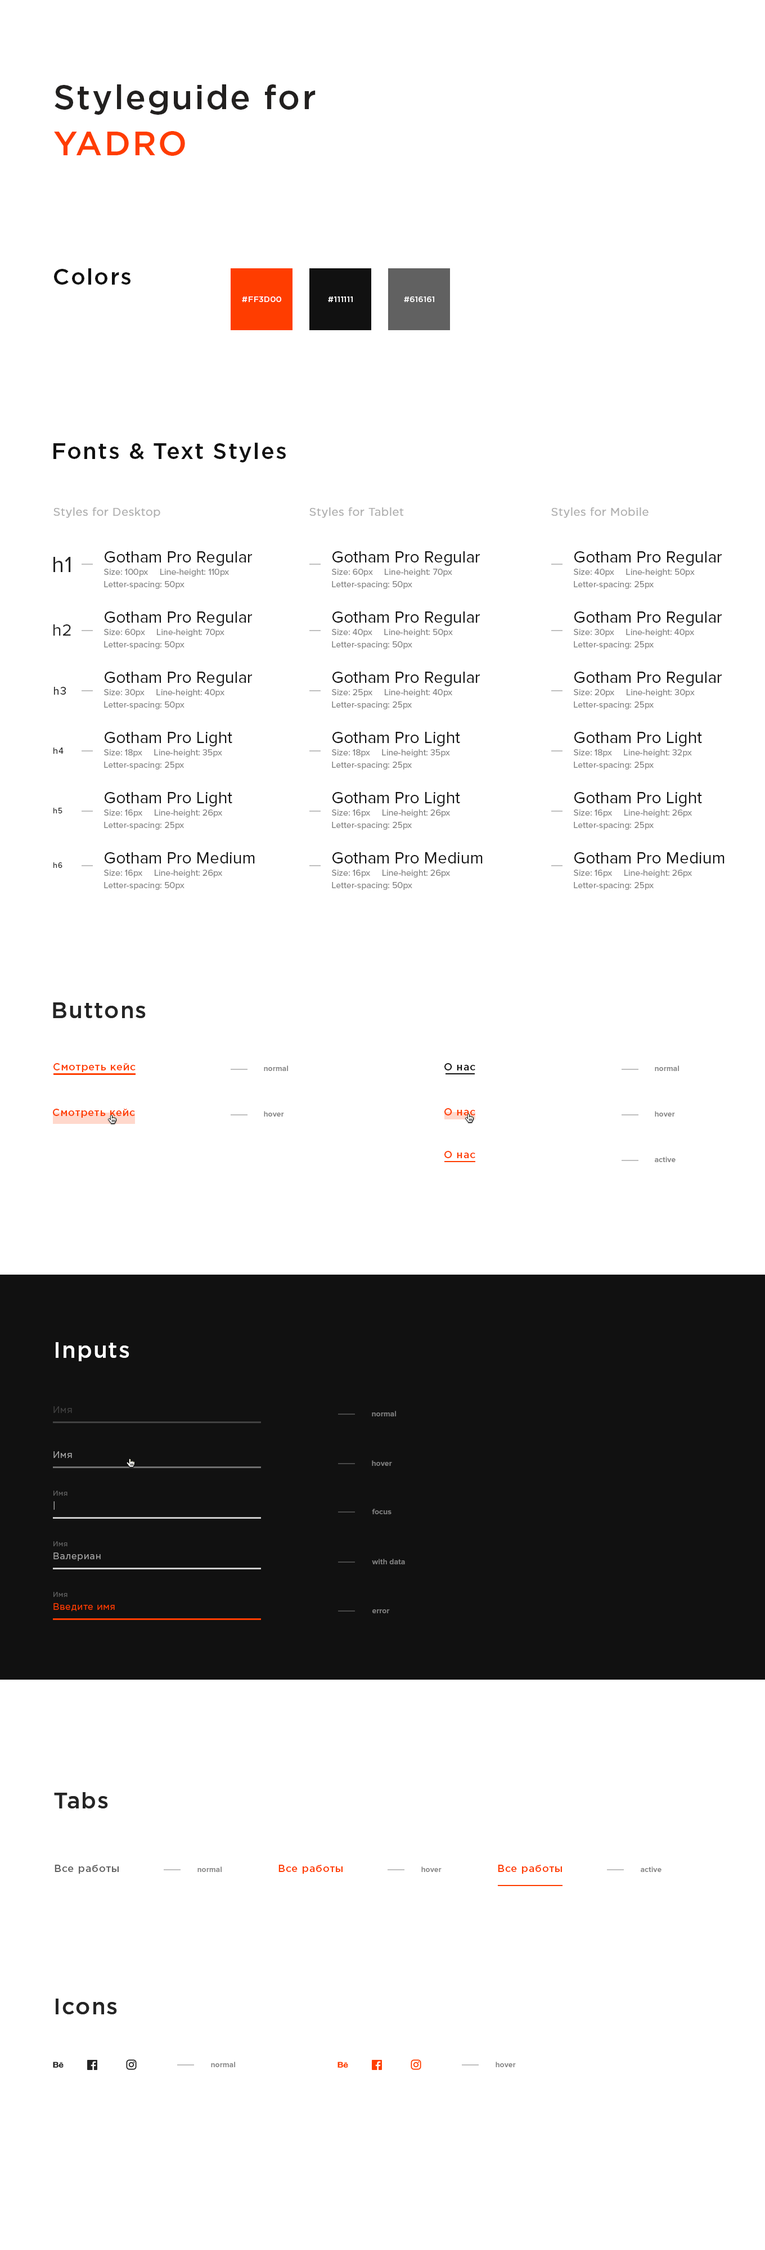
<style>
.page{position:relative;width:765px;height:2250px;background:#ffffff}
.page>*{position:absolute;margin:0}
.t1{font:33.8px/39.4px "GothamPro-Medium";letter-spacing:0.05em;color:#22201f}
.t2{font:33.8px/39.4px "GothamPro-Medium";letter-spacing:0.05em;color:#ff3d00}
.t3{font:22.5px "GothamPro-Medium";letter-spacing:0.05em;color:#111111}
.t4{font:7.9px "GothamPro-Medium";letter-spacing:0.025em;color:#ffffff;text-transform:uppercase}
.t5{font:11.2px "GothamPro";letter-spacing:0.025em;color:#b0b0b0}
.t6{font:22.5px "ProximaNova-Regular";letter-spacing:0.025em;color:#252525}
.t7{font:9px/12.4px "ProximaNova-Regular";color:#808080}
.t8{font:16.9px/33.8px "ProximaNova-Regular";color:#111111}
.t9{font:16.9px "ProximaNova-Regular";letter-spacing:0.025em;color:#252525}
.t10{font:11.2px "ProximaNova-Regular";letter-spacing:0.1em;color:#252525}
.t11{font:9px "ProximaNova-Regular";letter-spacing:0.1em;color:#252525}
.t12{font:7.9px "ProximaNova-Regular";letter-spacing:0.1em;color:#252525}
.t13{font:22.5px "GothamPro-Medium";letter-spacing:0.05em;color:#252525}
.t14{font:10.1px "GothamPro-Medium";letter-spacing:0.05em;color:#ff3d00}
.t15{font:7.9px "ProximaNova-Bold";color:#808080}
.t16{font:10.1px "GothamPro-Medium";letter-spacing:0.05em;color:#111111}
.t17{font:22.5px "GothamPro-Medium";letter-spacing:0.05em;color:#ffffff}
.t18{font:9px "GothamPro";letter-spacing:0.05em;color:#404040}
.t19{font:9px "GothamPro";letter-spacing:0.05em;color:#a6a6a6}
.t20{font:6.8px "GothamPro";letter-spacing:0.05em;color:#5e5e5e}
.t21{font:9px "GothamPro";letter-spacing:0.05em;color:#ff3d00}
.t22{font:10.1px "GothamPro-Medium";letter-spacing:0.05em;color:#616161}
</style>
<div class="page">
<p class="t1" style="left:54px;top:84px;width:262px;height:72px;text-align:right">Styleguide for<br><span class="t2">YADRO</span></p>
<p class="t3" style="left:54px;top:268px;width:76px;height:17px">Colors</p>
<p class="t4" style="left:242px;top:296px;width:39px;height:6px">#ff3d00</p>
<p class="t4" style="left:328px;top:296px;width:25px;height:6px">#111111</p>
<p class="t4" style="left:404px;top:296px;width:30px;height:6px">#616161</p>
<p class="t3" style="left:53px;top:443px;width:233px;height:19px">Fonts &amp; Text Styles</p>
<p class="t5" style="left:53px;top:507px;width:107px;height:11px">Styles for Desktop</p>
<p class="t5" style="left:309px;top:507px;width:95px;height:11px">Styles for Tablet</p>
<p class="t5" style="left:551px;top:507px;width:98px;height:11px">Styles for Mobile</p>
<p class="t6" style="left:53px;top:557px;width:18px;height:15px">h1</p>
<p class="t7" style="left:104px;top:551px;width:148px;height:38px"><span class="t8">Gotham Pro Regular<br></span>Size: 100px     Line-height: 110px<br>Letter-spacing: 50px</p>
<p class="t7" style="left:332px;top:551px;width:148px;height:38px"><span class="t8">Gotham Pro Regular<br></span>Size: 60px     Line-height: 70px<br>Letter-spacing: 50px</p>
<p class="t7" style="left:574px;top:551px;width:148px;height:38px"><span class="t8">Gotham Pro Regular<br></span>Size: 40px     Line-height: 50px<br>Letter-spacing: 25px</p>
<p class="t7" style="left:104px;top:611px;width:148px;height:38px"><span class="t8">Gotham Pro Regular<br></span>Size: 60px     Line-height: 70px<br>Letter-spacing: 50px</p>
<p class="t7" style="left:332px;top:611px;width:148px;height:38px"><span class="t8">Gotham Pro Regular<br></span>Size: 40px     Line-height: 50px<br>Letter-spacing: 50px</p>
<p class="t7" style="left:574px;top:611px;width:148px;height:38px"><span class="t8">Gotham Pro Regular<br></span>Size: 30px     Line-height: 40px<br>Letter-spacing: 25px</p>
<p class="t9" style="left:53px;top:624px;width:18px;height:12px">h2</p>
<p class="t7" style="left:104px;top:672px;width:148px;height:37px"><span class="t8">Gotham Pro Regular<br></span>Size: 30px     Line-height: 40px<br>Letter-spacing: 50px</p>
<p class="t7" style="left:332px;top:672px;width:148px;height:37px"><span class="t8">Gotham Pro Regular<br></span>Size: 25px     Line-height: 40px<br>Letter-spacing: 25px</p>
<p class="t7" style="left:574px;top:672px;width:148px;height:37px"><span class="t8">Gotham Pro Regular<br></span>Size: 20px     Line-height: 30px<br>Letter-spacing: 25px</p>
<p class="t10" style="left:54px;top:687px;width:12px;height:8px">h3</p>
<p class="t7" style="left:104px;top:732px;width:128px;height:38px"><span class="t8">Gotham Pro Light<br></span>Size: 18px     Line-height: 35px<br>Letter-spacing: 25px</p>
<p class="t7" style="left:332px;top:732px;width:128px;height:38px"><span class="t8">Gotham Pro Light<br></span>Size: 18px     Line-height: 35px<br>Letter-spacing: 25px</p>
<p class="t7" style="left:574px;top:732px;width:128px;height:38px"><span class="t8">Gotham Pro Light<br></span>Size: 18px     Line-height: 32px<br>Letter-spacing: 25px</p>
<p class="t11" style="left:53px;top:748px;width:11px;height:6px">h4</p>
<p class="t7" style="left:104px;top:792px;width:128px;height:38px"><span class="t8">Gotham Pro Light<br></span>Size: 16px     Line-height: 26px<br>Letter-spacing: 25px</p>
<p class="t7" style="left:332px;top:792px;width:128px;height:38px"><span class="t8">Gotham Pro Light<br></span>Size: 16px     Line-height: 26px<br>Letter-spacing: 25px</p>
<p class="t7" style="left:574px;top:792px;width:128px;height:38px"><span class="t8">Gotham Pro Light<br></span>Size: 16px     Line-height: 26px<br>Letter-spacing: 25px</p>
<p class="t12" style="left:53px;top:808px;width:9px;height:5px">h5</p>
<p class="t7" style="left:104px;top:852px;width:151px;height:38px"><span class="t8">Gotham Pro Medium<br></span>Size: 16px     Line-height: 26px<br>Letter-spacing: 50px</p>
<p class="t7" style="left:332px;top:852px;width:151px;height:38px"><span class="t8">Gotham Pro Medium<br></span>Size: 16px     Line-height: 26px<br>Letter-spacing: 50px</p>
<p class="t7" style="left:574px;top:852px;width:150px;height:38px"><span class="t8">Gotham Pro Medium<br></span>Size: 16px     Line-height: 26px<br>Letter-spacing: 25px</p>
<p class="t12" style="left:53px;top:862px;width:9px;height:6px">h6</p>
<p class="t13" style="left:53px;top:1002px;width:93px;height:16px">Buttons</p>
<p class="t14" style="left:53px;top:1063px;width:83px;height:9px">Смотреть кейс</p>
<p class="t15" style="left:264px;top:1065px;width:24px;height:6px">normal</p>
<p class="t16" style="left:444px;top:1063px;width:31px;height:7px">О нас</p>
<p class="t15" style="left:655px;top:1065px;width:24px;height:6px">normal</p>
<p class="t14" style="left:53px;top:1109px;width:82px;height:9px">Смотреть кейс</p>
<p class="t14" style="left:444px;top:1108px;width:31px;height:7px">О нас</p>
<p class="t15" style="left:264px;top:1111px;width:20px;height:6px">hover</p>
<p class="t15" style="left:655px;top:1111px;width:20px;height:6px">hover</p>
<p class="t14" style="left:444px;top:1151px;width:31px;height:7px">О нас</p>
<p class="t15" style="left:655px;top:1156px;width:21px;height:6px">active</p>
<p class="t17" style="left:56px;top:1342px;width:73px;height:19px">Inputs</p>
<p class="t18" style="left:53px;top:1406px;width:19px;height:7px">Имя</p>
<p class="t15" style="left:372px;top:1411px;width:24px;height:5px">normal</p>
<p class="t19" style="left:53px;top:1451px;width:19px;height:7px">Имя</p>
<p class="t15" style="left:372px;top:1460px;width:20px;height:6px">hover</p>
<p class="t20" style="left:53px;top:1491px;width:15px;height:5px">Имя</p>
<p class="t19" style="left:53px;top:1501px;width:2px;height:9px">|</p>
<p class="t15" style="left:372px;top:1509px;width:20px;height:5px">focus</p>
<p class="t20" style="left:53px;top:1541px;width:15px;height:5px">Имя</p>
<p class="t19" style="left:53px;top:1552px;width:48px;height:9px">Валериан</p>
<p class="t15" style="left:372px;top:1559px;width:33px;height:5px">with data</p>
<p class="t20" style="left:53px;top:1592px;width:15px;height:5px">Имя</p>
<p class="t21" style="left:53px;top:1603px;width:62px;height:9px">Введите имя</p>
<p class="t15" style="left:372px;top:1609px;width:18px;height:4px">error</p>
<p class="t13" style="left:54px;top:1792px;width:54px;height:16px">Tabs</p>
<p class="t22" style="left:55px;top:1865px;width:64px;height:9px">Все работы</p>
<p class="t14" style="left:278px;top:1865px;width:65px;height:9px">Все работы</p>
<p class="t14" style="left:498px;top:1865px;width:64px;height:9px">Все работы</p>
<p class="t15" style="left:197px;top:1866px;width:25px;height:6px">normal</p>
<p class="t15" style="left:421px;top:1866px;width:21px;height:6px">hover</p>
<p class="t15" style="left:641px;top:1866px;width:21px;height:6px">active</p>
<p class="t13" style="left:56px;top:1999px;width:61px;height:15px">Icons</p>
<p class="t15" style="left:211px;top:2062px;width:24px;height:5px">normal</p>
<p class="t15" style="left:496px;top:2062px;width:20px;height:5px">hover</p>
</div>
